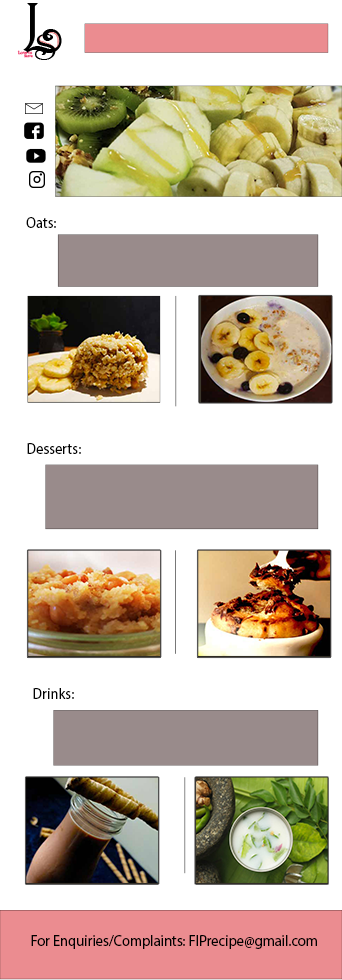
<style>
.page{position:relative;width:342px;height:980px;background:#ffffff}
.page>*{position:absolute;margin:0}
.t1{font:15px "MyriadPro-Regular";color:#010101;scale:0.96 1}
</style>
<div class="page">
<p class="t1" style="left:26px;top:217px;width:30px;height:11px">Oats:</p>
<p class="t1" style="left:27px;top:443px;width:54px;height:11px">Desserts:</p>
<p class="t1" style="left:33px;top:688px;width:41px;height:11px">Drinks:</p>
<p class="t1" style="left:31px;top:935px;width:286px;height:14px">For Enquiries/Complaints: FIPrecipe@gmail.com</p>
</div>
